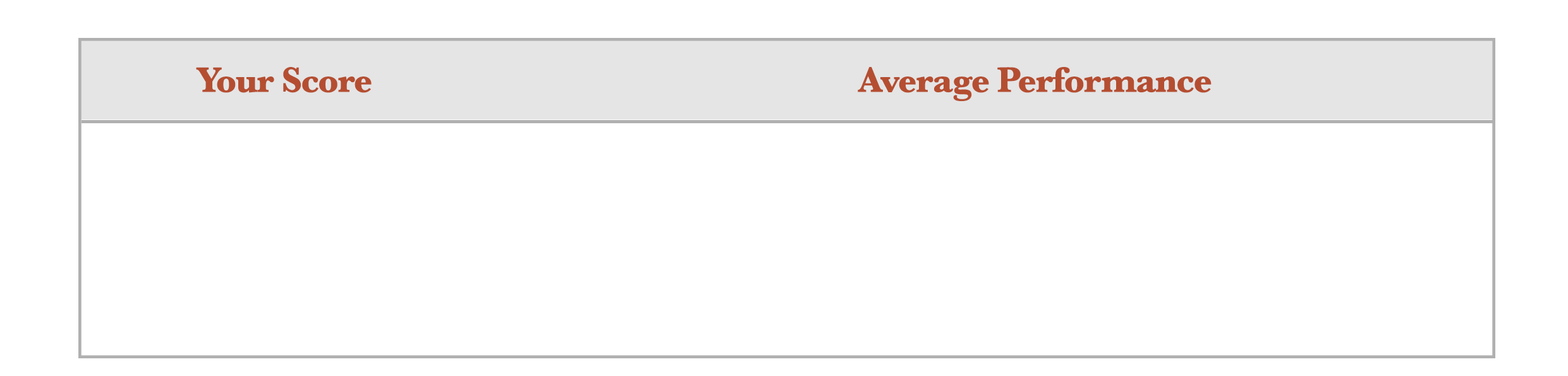
<style>
.page{position:relative;width:1568px;height:376px;background:#ffffff}
.page>*{position:absolute;margin:0}
.t1{font:36.9px "Baskerville-Bold";letter-spacing:-0.03em;color:#b54e31}
</style>
<div class="page">
<p class="t1" style="left:196px;top:67px;width:176px;height:26px">Your Score</p>
<p class="t1" style="left:858px;top:67px;width:354px;height:34px">Average Performance</p>
</div>
